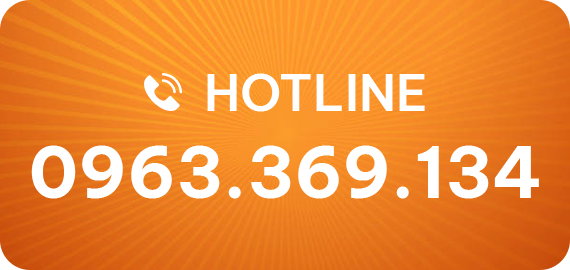
<style>
.page{position:relative;width:570px;height:270px}
.page>*{position:absolute;margin:0}
.t1{font:50px "BeVietnamPro-SemiBold";color:#ffffff}
.t2{font:70px "BeVietnamPro-Bold";color:#ffffff}
</style>
<div class="page">
<p class="t1" style="left:207px;top:73px;width:218px;height:39px">HOTLINE</p>
<p class="t2" style="left:31px;top:145px;width:508px;height:54px">0963.369.134</p>
</div>
